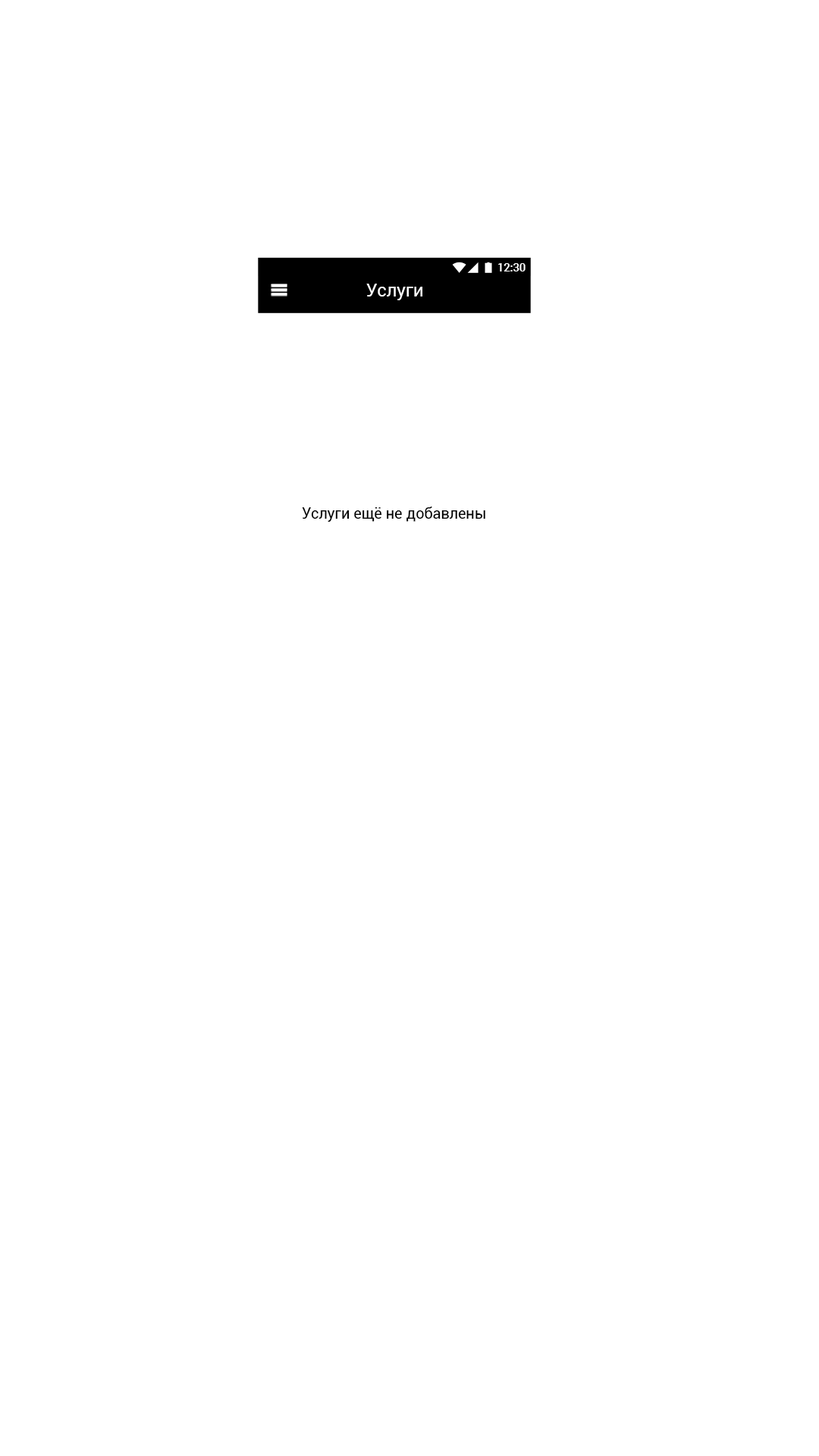
<style>
.page{position:relative;width:819px;height:1456px;background:#ffffff}
.page>*{position:absolute;margin:0}
.t1{font:11.1px "Roboto-Medium";color:#ffffff}
.t2{font:18.2px "Roboto-Regular";color:#ffffff}
.t3{font:15.1px "Roboto-Regular";color:#000000}
</style>
<div class="page">
<p class="t1" style="left:498px;top:263px;width:28px;height:8px">12:30</p>
<p class="t2" style="left:366px;top:284px;width:56px;height:16px">Услуги</p>
<p class="t3" style="left:302px;top:507px;width:183px;height:15px">Услуги ещё не добавлены</p>
</div>
